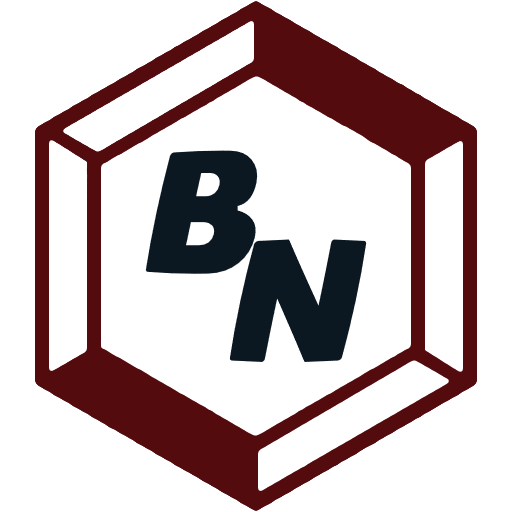
<style>
.page{position:relative;width:512px;height:512px;background:#ffffff}
.page>*{position:absolute;margin:0}
.t1{font:172px "LeanRegular";color:#0c1821}
</style>
<div class="page">
<p class="t1" style="left:145px;top:150px;width:114px;height:124px">B</p>
<p class="t1" style="left:229px;top:239px;width:138px;height:123px">N</p>
</div>
